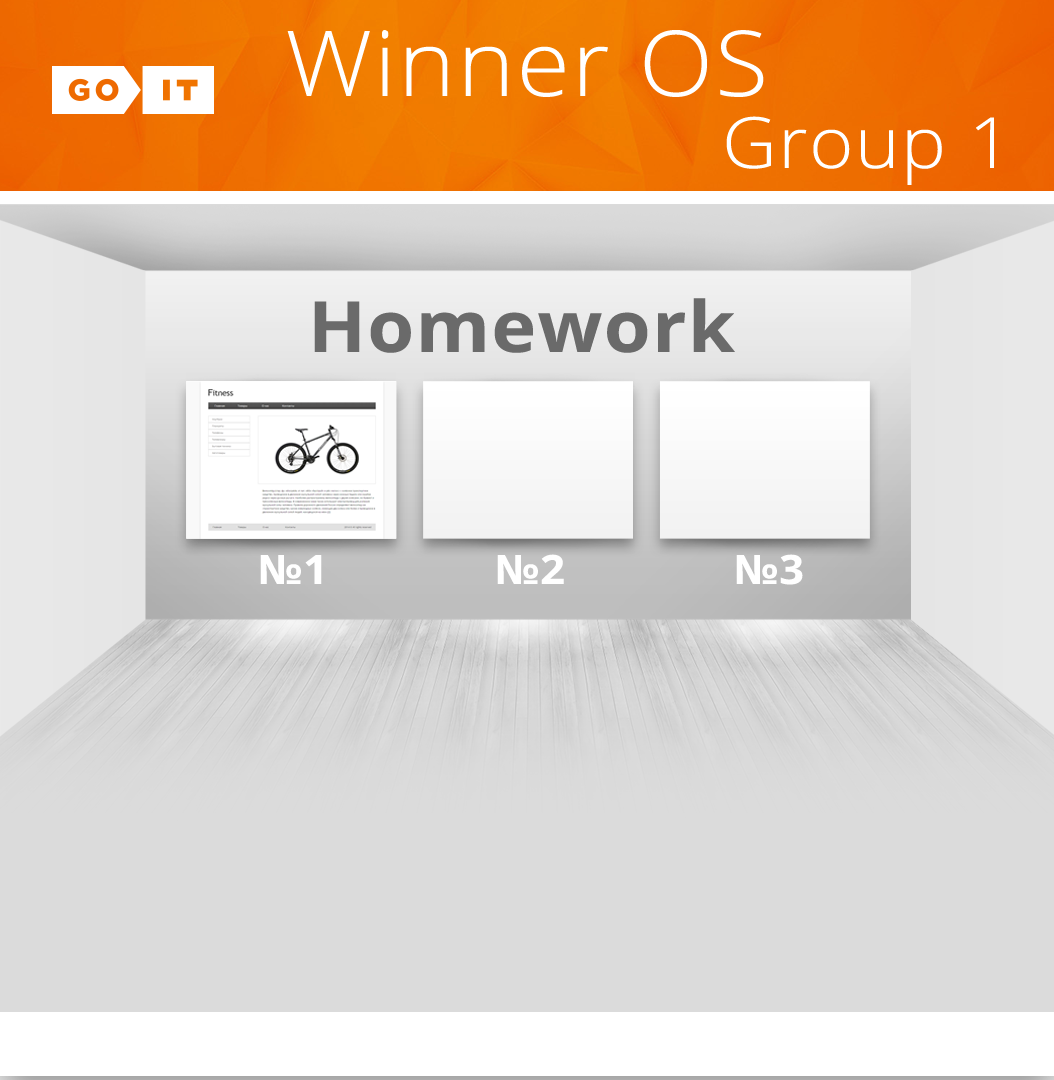
<style>
.page{position:relative;width:1054px;height:1080px;background:#dbdbdb}
.page>*{position:absolute;margin:0}
.t1{font:90.9px "OpenSans-Light";letter-spacing:0.02em;color:#ffffff;scale:1.07 1}
.t2{font:70.7px "OpenSans-Light";letter-spacing:0.02em;color:#ffffff;scale:1.07 1}
.t3{font:70.7px "OpenSans-Bold";letter-spacing:0.02em;color:#6a6a6a;scale:1.07 1}
.t4{font:40.4px "OpenSans-Bold";letter-spacing:0.02em;color:#ffffff;scale:1.07 1}
</style>
<div class="page">
<p class="t1" style="left:287px;top:30px;width:477px;height:67px">Winner OS</p>
<p class="t2" style="left:726px;top:116px;width:268px;height:69px">Group 1</p>
<p class="t3" style="left:314px;top:298px;width:421px;height:55px">Homework</p>
<p class="t4" style="left:260px;top:555px;width:62px;height:29px">№1</p>
<p class="t4" style="left:497px;top:554px;width:67px;height:30px">№2</p>
<p class="t4" style="left:736px;top:554px;width:67px;height:31px">№3</p>
</div>
